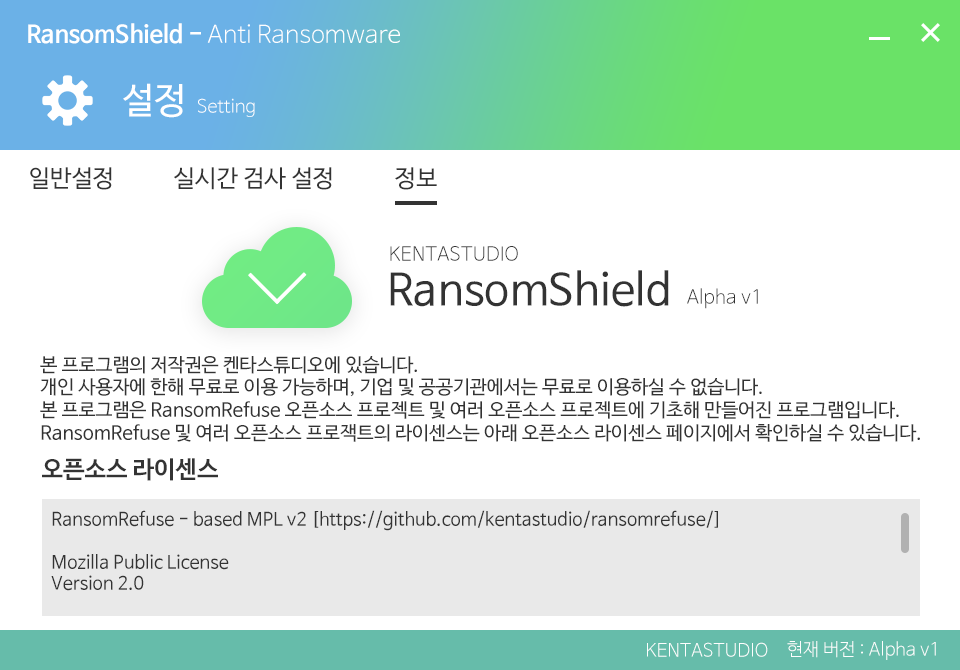
<style>
.page{position:relative;width:960px;height:670px;background:#ffffff}
.page>*{position:absolute;margin:0}
.t1{font:24px "NanumBarunGothicLight";color:#ffffff}
.t2{font:24px "NanumBarunGothicBold";color:#ffffff}
.t3{font:36px "NanumBarunGothic";color:#ffffff}
.t4{font:18px "NanumBarunGothicLight";color:#ffffff}
.t5{font:24px "NanumBarunGothic";color:#333333}
.t6{font:19.1px "NanumBarunGothicLight";color:#333333}
.t7{font:43.6px "NanumBarunGothic";color:#333333}
.t8{font:19px "NanumBarunGothic";color:#333333}
.t9{font:24px "NanumBarunGothicBold";color:#333333}
.t10{font:18px "NanumBarunGothic";color:#333333}
.t11{font:18px "NanumBarunGothicLight";color:#fefefe}
</style>
<div class="page">
<p class="t1" style="left:28px;top:23px;width:372px;height:21px"><span class="t2">RansomShield - </span>Anti Ransomware</p>
<p class="t3" style="left:123px;top:83px;width:60px;height:35px">설정</p>
<p class="t4" style="left:198px;top:98px;width:57px;height:19px">Setting</p>
<p class="t5" style="left:30px;top:167px;width:82px;height:23px">일반설정</p>
<p class="t5" style="left:174px;top:167px;width:158px;height:23px">실시간 검사 설정</p>
<p class="t5" style="left:395px;top:167px;width:42px;height:23px">정보</p>
<p class="t6" style="left:390px;top:246px;width:128px;height:15px">KENTASTUDIO</p>
<p class="t7" style="left:390px;top:270px;width:279px;height:37px">RansomShield</p>
<p class="t6" style="left:687px;top:288px;width:71px;height:21px">Alpha v1</p>
<p class="t8" style="left:40px;top:356px;width:880px;height:86px">본 프로그램의 저작권은 켄타스튜디오에 있습니다.<br>개인 사용자에 한해 무료로 이용 가능하며, 기업 및 공공기관에서는 무료로 이용하실 수 없습니다.<br>본 프로그램은 RansomRefuse 오픈소스 프로젝트 및 여러 오픈소스 프로젝트에 기초해 만들어진 프로그램입니다.<br>RansomRefuse 및 여러 오픈소스 프로잭트의 라이센스는 아래 오픈소스 라이센스 페이지에서 확인하실 수 있습니다.</p>
<p class="t9" style="left:42px;top:458px;width:176px;height:23px">오픈소스 라이센스</p>
<p class="t10" style="left:51px;top:510px;width:667px;height:81px">RansomRefuse - based MPL v2 [https://github.com/kentastudio/ransomrefuse/]<br><br>Mozilla Public License<br>Version 2.0</p>
<p class="t11" style="left:787px;top:641px;width:149px;height:19px">현재 버전 : Alpha v1</p>
<p class="t11" style="left:647px;top:642px;width:121px;height:15px">KENTASTUDIO</p>
</div>
